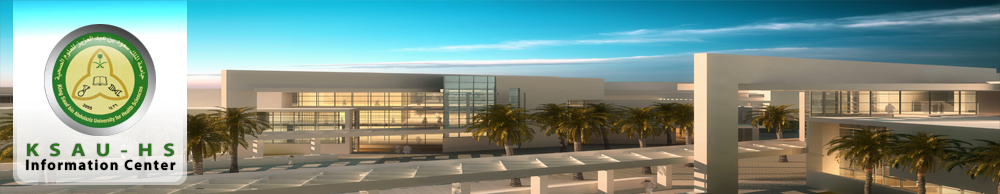
<style>
.page{position:relative;width:1000px;height:194px}
.page>*{position:absolute;margin:0}
.t1{font:15px/14px "MyriadPro-Bold";letter-spacing:0.1em;color:#000000}
.t2{font:18px/14px "MyriadPro-Bold";letter-spacing:0.46em;color:#2d7322;scale:1.22 1}
</style>
<div class="page">
<p class="t1" style="left:26px;top:143px;width:150px;height:27px;text-align:center"><span class="t2">KSAU-HS<br></span>Information Center</p>
</div>
